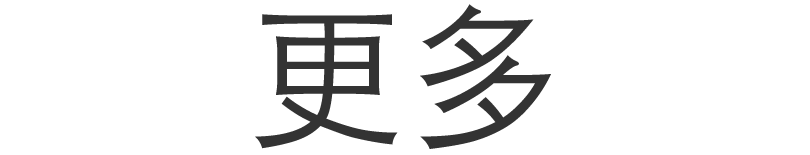
<style>
.page{position:relative;width:810px;height:155px;background:#ffffff}
.page>*{position:absolute;margin:0}
.t1{font:158.2px "STXihei";color:#333333}
</style>
<div class="page">
<p class="t1" style="left:255px;top:4px;width:296px;height:145px">更多</p>
</div>
